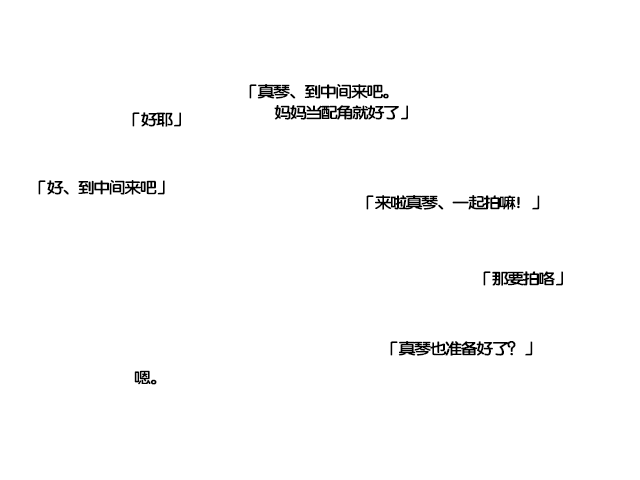
<style>
.page{position:relative;width:640px;height:480px;background:#ffffff}
.page>*{position:absolute;margin:0}
.t1{font:15.7px/21.3px "FZY4K--GBK1-0";letter-spacing:-0.13em;color:#000000;scale:1.14 1}
.t2{font:15.7px "FZY4K--GBK1-0";letter-spacing:-0.13em;color:#000000;scale:1.14 1}
</style>
<div class="page">
<p class="t1" style="left:249px;top:84px;width:159px;height:36px">「真琴、到中间来吧。<br> 妈妈当配角就好了」</p>
<p class="t2" style="left:132px;top:112px;width:49px;height:15px">「好耶」</p>
<p class="t2" style="left:38px;top:180px;width:127px;height:15px">「好、到中间来吧」</p>
<p class="t2" style="left:366px;top:195px;width:174px;height:15px">「来啦真琴、一起拍嘛！」</p>
<p class="t2" style="left:483px;top:271px;width:80px;height:15px">「那要拍咯」</p>
<p class="t2" style="left:390px;top:341px;width:143px;height:15px">「真琴也准备好了？」</p>
<p class="t2" style="left:134px;top:370px;width:23px;height:15px">嗯。</p>
</div>
